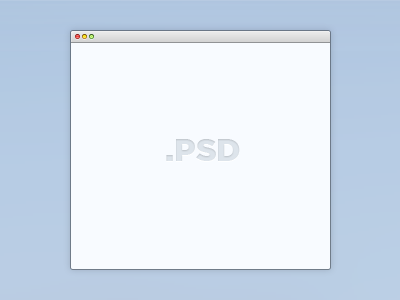
<style>
.page{position:relative;width:400px;height:300px;background:#f8fbff}
.page>*{position:absolute;margin:0}
.t1{font:32px "GothamBlack";color:#dde4eb}
</style>
<div class="page">
<p class="t1" style="left:166px;top:139px;width:74px;height:22px">.PSD</p>
</div>
